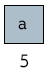
<style>
.page{position:relative;width:49px;height:74px;background:#ffffff}
.page>*{position:absolute;margin:0}
.t1{font:18px "GilliusADFNo2-Regular";color:#000000}
</style>
<div class="page">
<p class="t1" style="left:18px;top:20px;width:9px;height:10px">a</p>
<p class="t1" style="left:20px;top:54px;width:9px;height:14px">5</p>
</div>
